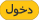
<style>
.page{position:relative;width:39px;height:20px;background:#fec513}
.page>*{position:absolute;margin:0}
.t1{font:12.4px "Tahoma";color:#333333}
</style>
<div class="page">
<p class="t1" style="left:6px;top:4px;width:27px;height:13px">دخول</p>
</div>
